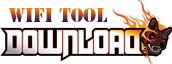
<style>
.page{position:relative;width:172px;height:64px}
.page>*{position:absolute;margin:0}
.t1{font:18px "StencilStd"}
</style>
<div class="page">
<p class="t1" style="left:9px;top:8px;width:98px;height:14px">Wifi Tool</p>
</div>
